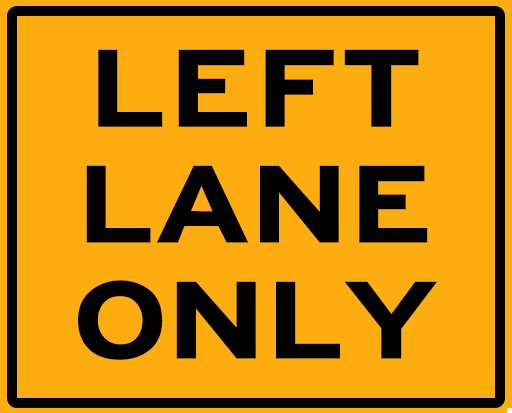
<style>
.page{position:relative;width:512px;height:413px;background:#fead10}
.page>*{position:absolute;margin:0}
.t1{font:115.9px/115.9px "HittheRoad";color:#000000;scale:1.24 1}
</style>
<div class="page">
<p class="t1" style="left:78px;top:49px;width:359px;height:311px;text-align:center">LEFT<br>LANE<br>ONLY</p>
</div>
